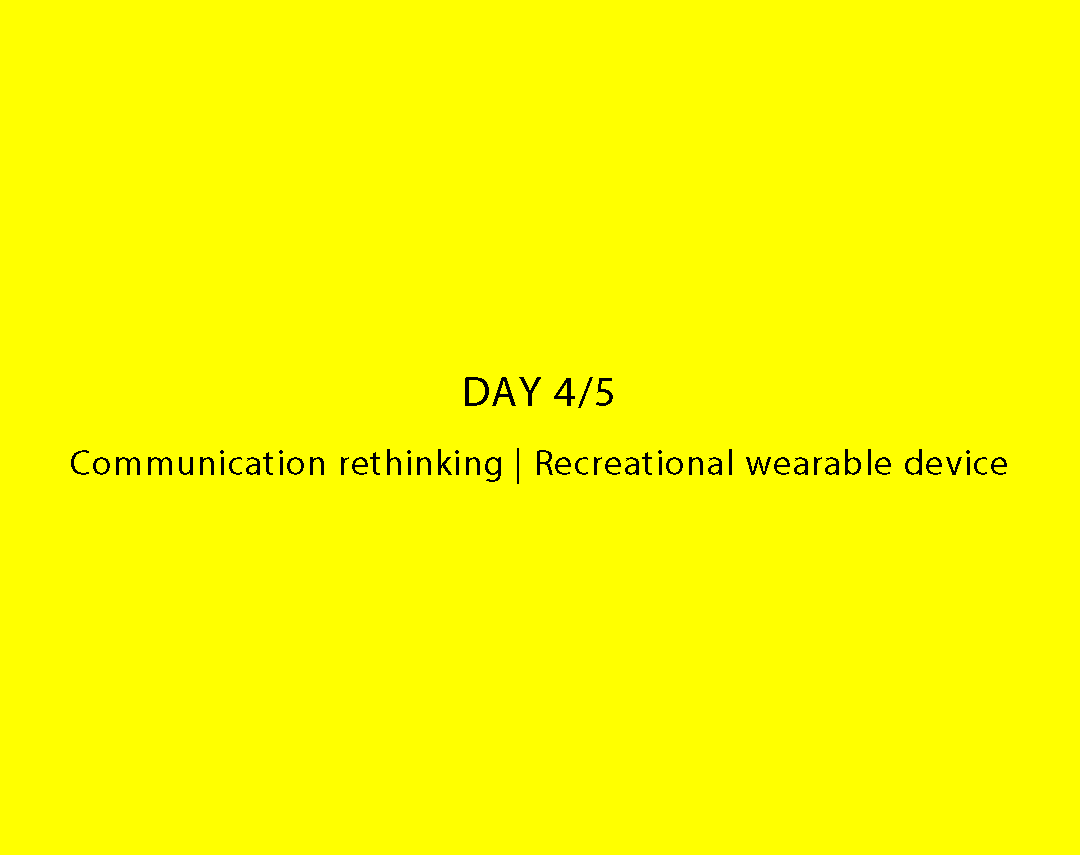
<style>
.page{position:relative;width:1080px;height:855px;background:#ffff00}
.page>*{position:absolute;margin:0}
.t1{font:36px "MyriadPro-Regular";letter-spacing:0.05em;color:#000000}
.t2{font:42px "MyriadPro-Regular";letter-spacing:0.05em;color:#000000}
</style>
<div class="page">
<p class="t1" style="left:71px;top:377px;width:936px;height:107px;text-align:center"><span class="t2">DAY 4/5<br></span>Communication rethinking | Recreational wearable device</p>
</div>
